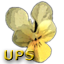
<style>
.page{position:relative;width:64px;height:64px;background:#ffffff}
.page>*{position:absolute;margin:0}
.t1{font:14px "Verdana-Bold"}
</style>
<div class="page">
<p class="t1" style="left:4px;top:49px;width:31px;height:12px">UPS</p>
</div>
